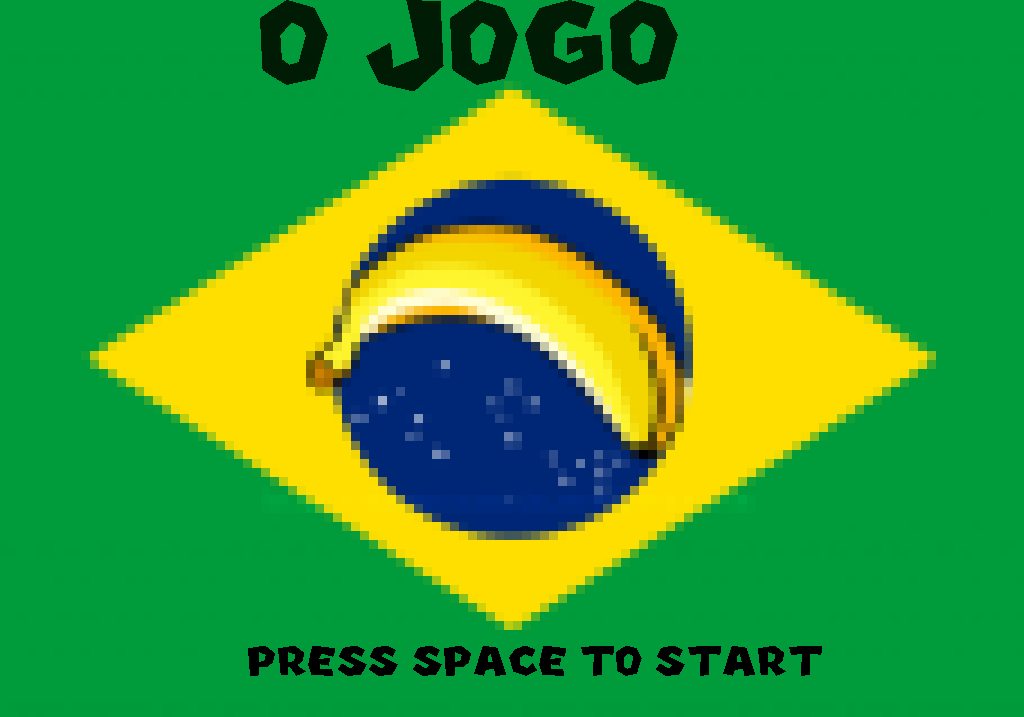
<style>
.page{position:relative;width:1024px;height:717px;background:#009b3a}
.page>*{position:absolute;margin:0}
.t1{font:133.6px "NewSuperMarioFontU";color:#001c05;scale:0.95 1}
.t2{font:48px "NewSuperMarioFontU";color:#000000}
</style>
<div class="page">
<p class="t1" style="left:260px;top:0px;width:418px;height:91px">O JOGO</p>
<p class="t2" style="left:248px;top:646px;width:574px;height:30px">PRESS SPACE TO START</p>
</div>
